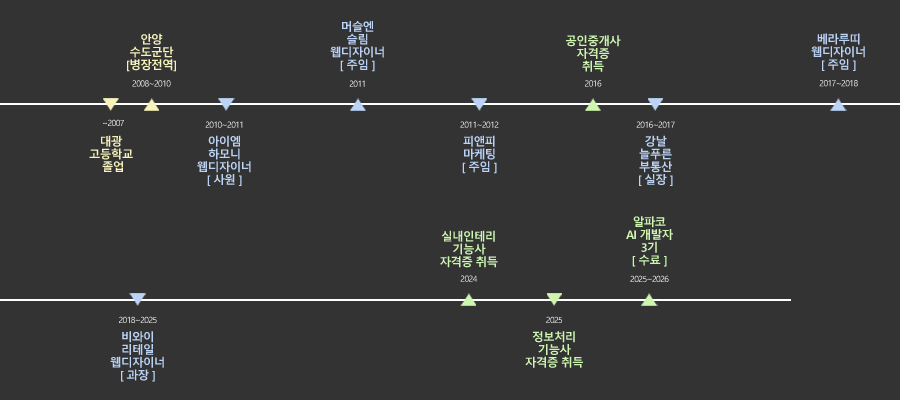
<style>
.page{position:relative;width:900px;height:400px;background:#333333}
.page>*{position:absolute;margin:0}
.t1{font:11.8px/12.8px "MalgunGothicBold";letter-spacing:-0.07em;color:#bbd4f6}
.t2{font:11.8px/12.8px "MalgunGothicBold";letter-spacing:-0.07em;color:#f6f2bb}
.t3{font:11.8px/12.8px "MalgunGothicBold";letter-spacing:-0.07em;color:#cef6b1}
.t4{font:8.6px "MalgunGothic";letter-spacing:-0.07em;color:#f3f3f3}
.t5{font:8.6px "MalgunGothic";letter-spacing:-0.07em}
</style>
<div class="page">
<p class="t1" style="left:330px;top:21px;width:54px;height:51px;text-align:center">머슬엔<br>슬림<br>웹디자이너<br>[ 주임 ]</p>
<p class="t2" style="left:127px;top:33px;width:49px;height:39px;text-align:center">안양<br>수도군단<br>[병장전역]</p>
<p class="t3" style="left:566px;top:35px;width:55px;height:37px;text-align:center">공인중개사<br>자격증<br>취득</p>
<p class="t1" style="left:811px;top:33px;width:54px;height:38px;text-align:center">베라루띠<br>웹디자이너<br>[ 주임 ]</p>
<p class="t4" style="left:132px;top:80px;width:39px;height:7px">2008~2010</p>
<p class="t5" style="left:349px;top:80px;width:16px;height:7px">2011</p>
<p class="t5" style="left:585px;top:80px;width:17px;height:7px">2016</p>
<p class="t5" style="left:819px;top:80px;width:39px;height:7px">2017~2018</p>
<p class="t5" style="left:103px;top:119px;width:21px;height:7px">~2007</p>
<p class="t5" style="left:205px;top:121px;width:38px;height:7px">2010~2011</p>
<p class="t5" style="left:460px;top:121px;width:39px;height:7px">2011~2012</p>
<p class="t5" style="left:636px;top:121px;width:39px;height:7px">2016~2017</p>
<p class="t2" style="left:89px;top:135px;width:44px;height:37px;text-align:center">대광 <br>고등학교 <br>졸업</p>
<p class="t1" style="left:197px;top:135px;width:54px;height:51px;text-align:center">아이엠<br>하모니<br>웹디자이너<br>[ 사원 ]</p>
<p class="t1" style="left:462px;top:135px;width:35px;height:39px;text-align:center">피앤피<br>마케팅<br>[ 주임 ]</p>
<p class="t1" style="left:639px;top:135px;width:34px;height:51px;text-align:center">강날<br>늘푸른<br>부통산<br>[ 실장 ]</p>
<p class="t3" style="left:626px;top:216px;width:47px;height:51px;text-align:center">알파코<br>AI 개발자<br>3기<br>[ 수료 ]</p>
<p class="t3" style="left:440px;top:230px;width:58px;height:38px;text-align:center">실내인테리<br>기능사<br>자격증 취득</p>
<p class="t5" style="left:460px;top:275px;width:18px;height:7px">2024</p>
<p class="t5" style="left:630px;top:275px;width:39px;height:7px">2025~2026</p>
<p class="t4" style="left:119px;top:316px;width:38px;height:7px">2018~2025</p>
<p class="t4" style="left:546px;top:316px;width:16px;height:7px">2025</p>
<p class="t1" style="left:110px;top:331px;width:54px;height:51px;text-align:center">비와이<br>리테일<br>웹디자이너<br>[ 과장 ]</p>
<p class="t3" style="left:525px;top:331px;width:58px;height:37px;text-align:center">정보처리<br>기능사<br>자격증 취득</p>
</div>
